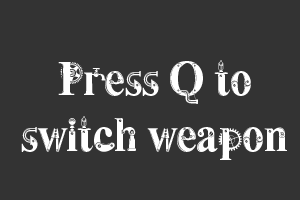
<style>
.page{position:relative;width:300px;height:200px;background:#333333}
.page>*{position:absolute;margin:0}
.t1{font:47px "Steamy";letter-spacing:-0.04em;color:#ffffff}
</style>
<div class="page">
<p class="t1" style="left:21px;top:60px;width:266px;height:100px;text-align:center">Press Q to<br>switch weapon</p>
</div>
